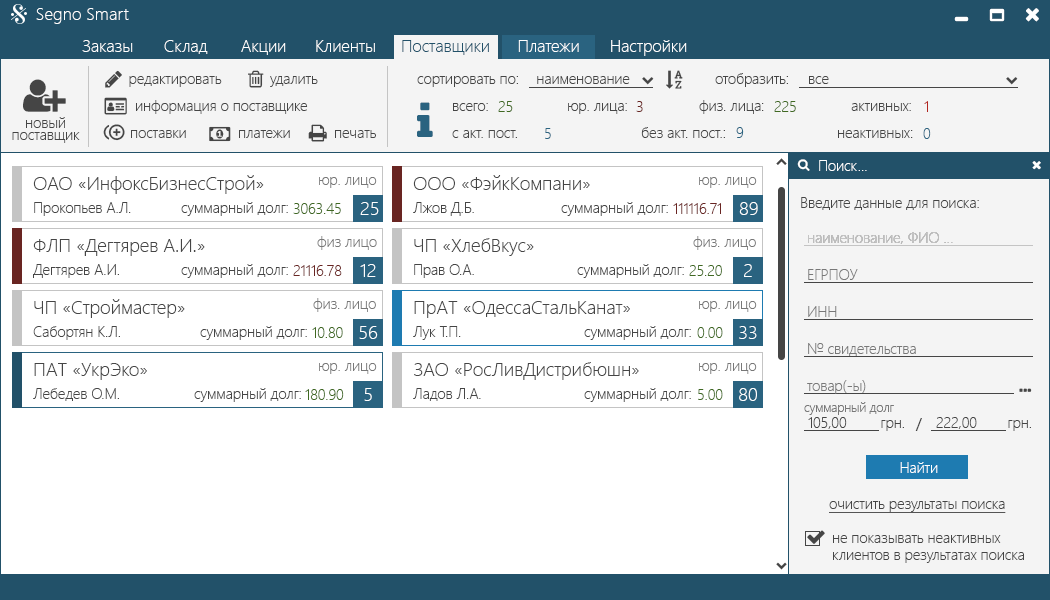
<style>
.page{position:relative;width:1050px;height:600px;background:#ffffff}
.page>*{position:absolute;margin:0}
.t1{font:17.2px "SegoeUI-Light";color:#ffffff}
.t2{font:16.7px "SegoeUI-Light";color:#ffffff}
.t3{font:16.7px "SegoeUI-Light";color:#225169}
.t4{font:14.6px "SegoeUI-Light";color:#454545}
.t5{font:14.6px "SegoeUI-Light";color:#406922}
.t6{font:14.6px "SegoeUI-Light";color:#692522}
.t7{font:14.6px "SegoeUI-Light";color:#b1241e}
.t8{font:14.6px/12.5px "SegoeUI-Light";color:#454545}
.t9{font:14.6px "SegoeUI-Light";color:#2a6380}
.t10{font:14.6px "SegoeUI-Light";color:#ffffff}
.t11{font:18.8px "SegoeUI-Light";color:#454545}
.t12{font:14.6px "SegoeUI-Light";color:#787878}
.t13{font:18.8px "SegoeUI-Light";color:#ffffff}
.t14{font:14.6px "SegoeUI-Light";color:#c4c4c4}
.t15{font:12.5px "SegoeUI-Light";color:#787878}
.t16{font:14.6px "SegoeUI";color:#454545}
.t17{font:14.6px "SegoeUI-Light";color:#454545;text-decoration:underline}
</style>
<div class="page">
<p class="t1" style="left:36px;top:8px;width:93px;height:16px">Segno Smart</p>
<p class="t2" style="left:82px;top:40px;width:51px;height:12px">Заказы</p>
<p class="t2" style="left:164px;top:40px;width:44px;height:14px">Склад</p>
<p class="t2" style="left:241px;top:40px;width:45px;height:15px">Акции</p>
<p class="t2" style="left:316px;top:40px;width:59px;height:12px">Клиенты</p>
<p class="t3" style="left:402px;top:40px;width:87px;height:15px">Поставщики</p>
<p class="t2" style="left:518px;top:40px;width:61px;height:12px">Платежи</p>
<p class="t2" style="left:611px;top:40px;width:76px;height:16px">Настройки</p>
<p class="t4" style="left:129px;top:76px;width:93px;height:11px">редактировать</p>
<p class="t4" style="left:270px;top:76px;width:48px;height:11px">удалить</p>
<p class="t4" style="left:417px;top:76px;width:101px;height:11px">сортировать по:</p>
<p class="t4" style="left:537px;top:76px;width:93px;height:8px">наименование</p>
<p class="t4" style="left:715px;top:73px;width:73px;height:14px">отобразить:</p>
<p class="t4" style="left:809px;top:76px;width:20px;height:8px">все</p>
<p class="t4" style="left:136px;top:100px;width:172px;height:14px">информация о поставщике</p>
<p class="t5" style="left:498px;top:101px;width:15px;height:11px">25</p>
<p class="t6" style="left:636px;top:101px;width:7px;height:11px">3</p>
<p class="t4" style="left:699px;top:100px;width:65px;height:14px">физ. лица:</p>
<p class="t5" style="left:774px;top:101px;width:22px;height:11px">225</p>
<p class="t7" style="left:924px;top:101px;width:4px;height:11px">1</p>
<p class="t4" style="left:453px;top:103px;width:35px;height:8px">всего:</p>
<p class="t4" style="left:568px;top:103px;width:59px;height:11px">юр. лица:</p>
<p class="t4" style="left:851px;top:103px;width:60px;height:8px">активных:</p>
<p class="t8" style="left:12px;top:117px;width:68px;height:26px;text-align:center">новый<br>поставщик</p>
<p class="t4" style="left:131px;top:130px;width:55px;height:8px">поставки</p>
<p class="t4" style="left:239px;top:130px;width:51px;height:8px">платежи</p>
<p class="t4" style="left:335px;top:130px;width:41px;height:8px">печать</p>
<p class="t4" style="left:452px;top:130px;width:65px;height:8px">с акт. пост.</p>
<p class="t9" style="left:545px;top:128px;width:6px;height:11px">5</p>
<p class="t4" style="left:641px;top:127px;width:84px;height:11px">без акт. пост.:</p>
<p class="t9" style="left:736px;top:127px;width:8px;height:11px">9</p>
<p class="t4" style="left:838px;top:130px;width:75px;height:8px">неактивных:</p>
<p class="t9" style="left:923px;top:128px;width:8px;height:11px">0</p>
<p class="t10" style="left:819px;top:160px;width:48px;height:11px">Поиск...</p>
<p class="t11" style="left:33px;top:175px;width:231px;height:19px">ОАО «ИнфоксБизнесСтрой»</p>
<p class="t12" style="left:319px;top:177px;width:58px;height:11px">юр. лицо</p>
<p class="t11" style="left:413px;top:175px;width:177px;height:15px">ООО «ФэйкКомпани»</p>
<p class="t12" style="left:699px;top:177px;width:58px;height:11px">юр. лицо</p>
<p class="t4" style="left:801px;top:197px;width:178px;height:13px">Введите данные для поиска:</p>
<p class="t4" style="left:34px;top:202px;width:97px;height:14px">Прокопьев А.Л.</p>
<p class="t4" style="left:181px;top:202px;width:107px;height:14px">суммарный долг:</p>
<p class="t5" style="left:293px;top:203px;width:48px;height:11px">3063.45</p>
<p class="t13" style="left:360px;top:202px;width:19px;height:13px">25</p>
<p class="t4" style="left:413px;top:202px;width:61px;height:14px">Лжов Д.Б.</p>
<p class="t4" style="left:561px;top:202px;width:107px;height:14px">суммарный долг:</p>
<p class="t6" style="left:673px;top:203px;width:48px;height:11px">111116.71</p>
<p class="t13" style="left:739px;top:202px;width:19px;height:13px">89</p>
<p class="t14" style="left:808px;top:232px;width:145px;height:12px">наименование, ФИО ...</p>
<p class="t14" style="left:808px;top:232px;width:145px;height:12px">наименование, ФИО ...</p>
<p class="t11" style="left:33px;top:239px;width:172px;height:17px">ФЛП «Дегтярев А.И.»</p>
<p class="t12" style="left:317px;top:236px;width:60px;height:14px">физ лицо</p>
<p class="t11" style="left:414px;top:238px;width:120px;height:18px">ЧП «ХлебВкус»</p>
<p class="t12" style="left:693px;top:236px;width:63px;height:14px">физ. лицо</p>
<p class="t4" style="left:33px;top:264px;width:86px;height:14px">Дегтярев А.И.</p>
<p class="t4" style="left:181px;top:264px;width:107px;height:14px">суммарный долг:</p>
<p class="t6" style="left:293px;top:265px;width:49px;height:11px">21116.78</p>
<p class="t13" style="left:360px;top:264px;width:16px;height:13px">12</p>
<p class="t4" style="left:414px;top:264px;width:60px;height:14px">Прав О.А.</p>
<p class="t4" style="left:577px;top:264px;width:107px;height:14px">суммарный долг:</p>
<p class="t5" style="left:689px;top:265px;width:33px;height:11px">25.20</p>
<p class="t13" style="left:744px;top:264px;width:8px;height:13px">2</p>
<p class="t12" style="left:808px;top:269px;width:50px;height:11px">ЕГРПОУ</p>
<p class="t11" style="left:34px;top:299px;width:151px;height:19px">ЧП «Строймастер»</p>
<p class="t12" style="left:313px;top:298px;width:63px;height:14px">физ. лицо</p>
<p class="t11" style="left:414px;top:301px;width:216px;height:17px">ПрАТ «ОдессаСтальКанат»</p>
<p class="t12" style="left:699px;top:301px;width:58px;height:11px">юр. лицо</p>
<p class="t12" style="left:808px;top:306px;width:29px;height:11px">ИНН</p>
<p class="t4" style="left:33px;top:326px;width:87px;height:14px">Сабортян К.Л.</p>
<p class="t4" style="left:200px;top:326px;width:107px;height:14px">суммарный долг:</p>
<p class="t5" style="left:312px;top:327px;width:31px;height:11px">10.80</p>
<p class="t13" style="left:359px;top:326px;width:19px;height:13px">56</p>
<p class="t4" style="left:413px;top:326px;width:48px;height:14px">Лук Т.П.</p>
<p class="t4" style="left:584px;top:326px;width:107px;height:14px">суммарный долг:</p>
<p class="t5" style="left:697px;top:327px;width:26px;height:11px">0.00</p>
<p class="t13" style="left:739px;top:326px;width:18px;height:13px">33</p>
<p class="t12" style="left:808px;top:343px;width:108px;height:13px">№ свидетельства</p>
<p class="t11" style="left:34px;top:363px;width:113px;height:17px">ПАТ «УкрЭко»</p>
<p class="t12" style="left:319px;top:363px;width:58px;height:11px">юр. лицо</p>
<p class="t11" style="left:414px;top:362px;width:225px;height:18px">ЗАО «РосЛивДистрибюшн»</p>
<p class="t12" style="left:699px;top:363px;width:58px;height:11px">юр. лицо</p>
<p class="t4" style="left:33px;top:388px;width:86px;height:13px">Лебедев О.М.</p>
<p class="t4" style="left:194px;top:388px;width:107px;height:14px">суммарный долг:</p>
<p class="t5" style="left:305px;top:389px;width:39px;height:11px">180.90</p>
<p class="t13" style="left:364px;top:388px;width:8px;height:13px">5</p>
<p class="t4" style="left:413px;top:388px;width:68px;height:13px">Ладов Л.А.</p>
<p class="t4" style="left:584px;top:388px;width:107px;height:14px">суммарный долг:</p>
<p class="t5" style="left:698px;top:389px;width:25px;height:11px">5.00</p>
<p class="t13" style="left:739px;top:388px;width:18px;height:13px">80</p>
<p class="t12" style="left:807px;top:380px;width:59px;height:14px">товар(-ы)</p>
<p class="t15" style="left:804px;top:402px;width:90px;height:13px">суммарный долг</p>
<p class="t4" style="left:808px;top:417px;width:39px;height:12px">105,00</p>
<p class="t4" style="left:881px;top:420px;width:23px;height:11px">грн.</p>
<p class="t16" style="left:915px;top:418px;width:7px;height:13px">/</p>
<p class="t4" style="left:936px;top:417px;width:41px;height:12px">222,00</p>
<p class="t4" style="left:1008px;top:420px;width:23px;height:11px">грн.</p>
<p class="t10" style="left:900px;top:462px;width:38px;height:11px">Найти</p>
<p class="t17" style="left:829px;top:501px;width:177px;height:12px">очистить результаты поиска</p>
<p class="t4" style="left:833px;top:535px;width:191px;height:28px">не показывать неактивных <br>клиентов в результатах поиска</p>
</div>
